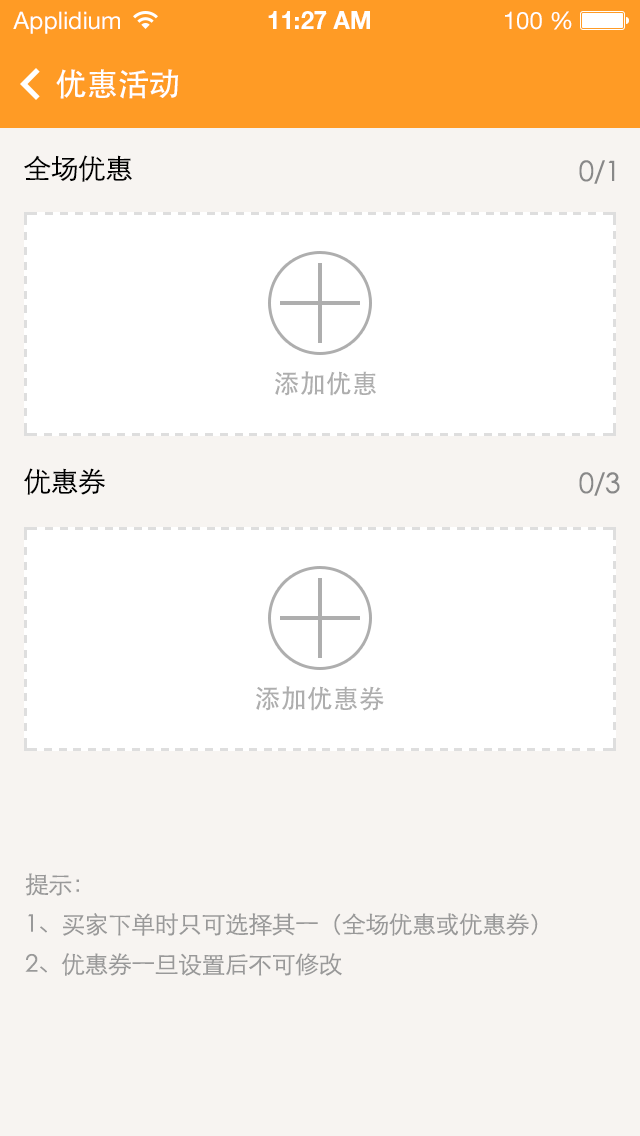
<style>
.page{position:relative;width:640px;height:1136px;background:#f7f4f1}
.page>*{position:absolute;margin:0}
.t1{font:32px "STHeiti";letter-spacing:-0.025em;color:#ffffff}
.t2{font:28px "STXihei";letter-spacing:-0.025em;color:#000000}
.t3{font:28px "STXihei";letter-spacing:-0.025em;color:#888888}
.t4{font:26px "STHeiti";color:#aeaeae}
.t5{font:24px/40px "STXihei";letter-spacing:-0.025em;color:#999999}
</style>
<div class="page">
<p class="t1" style="left:56px;top:69px;width:123px;height:30px">优惠活动</p>
<p class="t2" style="left:24px;top:155px;width:108px;height:27px">全场优惠</p>
<p class="t3" style="left:579px;top:160px;width:36px;height:24px">0/1</p>
<p class="t4" style="left:275px;top:371px;width:101px;height:25px">添加优惠</p>
<p class="t2" style="left:24px;top:468px;width:81px;height:27px">优惠券</p>
<p class="t3" style="left:579px;top:472px;width:41px;height:24px">0/3</p>
<p class="t4" style="left:256px;top:686px;width:128px;height:25px">添加优惠券</p>
<p class="t5" style="left:25px;top:873px;width:513px;height:103px">提示：<br>1、买家下单时只可选择其一（全场优惠或优惠券）<br>2、优惠券一旦设置后不可修改</p>
</div>
